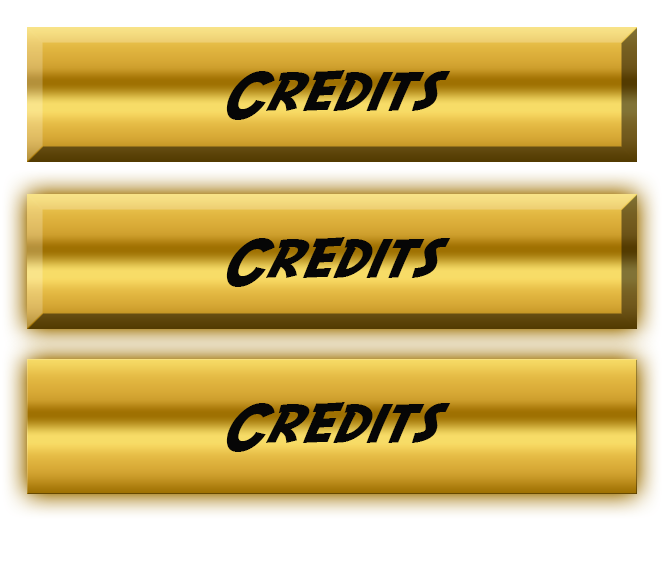
<style>
.page{position:relative;width:662px;height:567px}
.page>*{position:absolute;margin:0}
.t1{font:55.3px "SFFedora";letter-spacing:-0.005em;color:#060606;scale:1.05 1}
</style>
<div class="page">
<p class="t1" style="left:226px;top:70px;width:225px;height:50px">Credits</p>
<p class="t1" style="left:226px;top:237px;width:225px;height:50px">Credits</p>
<p class="t1" style="left:226px;top:402px;width:225px;height:50px">Credits</p>
</div>
